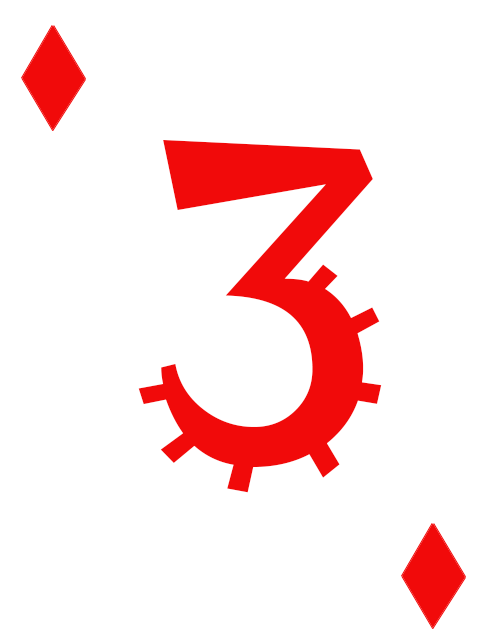
<style>
.page{position:relative;width:480px;height:640px;background:#ffffff}
.page>*{position:absolute;margin:0}
.t1{font:386.3px "Jokerman-Regular";color:#f10a0a}
</style>
<div class="page">
<p class="t1" style="left:138px;top:140px;width:244px;height:353px">3</p>
</div>
